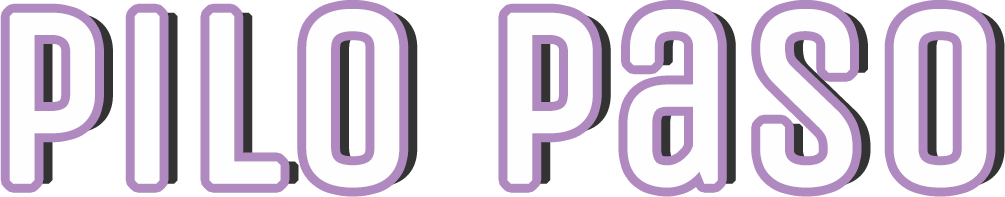
<style>
.page{position:relative;width:1005px;height:197px;background:#ffffff}
.page>*{position:absolute;margin:0}
.t1{font:252.3px "UnicaOne-Regular";color:#fefefe;font-weight:bold}
</style>
<div class="page">
<p class="t1" style="left:9px;top:9px;width:978px;height:179px">Pilo Paso</p>
</div>
